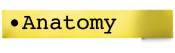
<style>
.page{position:relative;width:175px;height:53px;background:#ffffff}
.page>*{position:absolute;margin:0}
.t1{font:22.5px "Courier";color:#000000}
</style>
<div class="page">
<p class="t1" style="left:22px;top:15px;width:95px;height:19px">Anatomy</p>
<p class="t1" style="left:11px;top:19px;width:8px;height:8px;rotate:-7deg">•</p>
</div>
